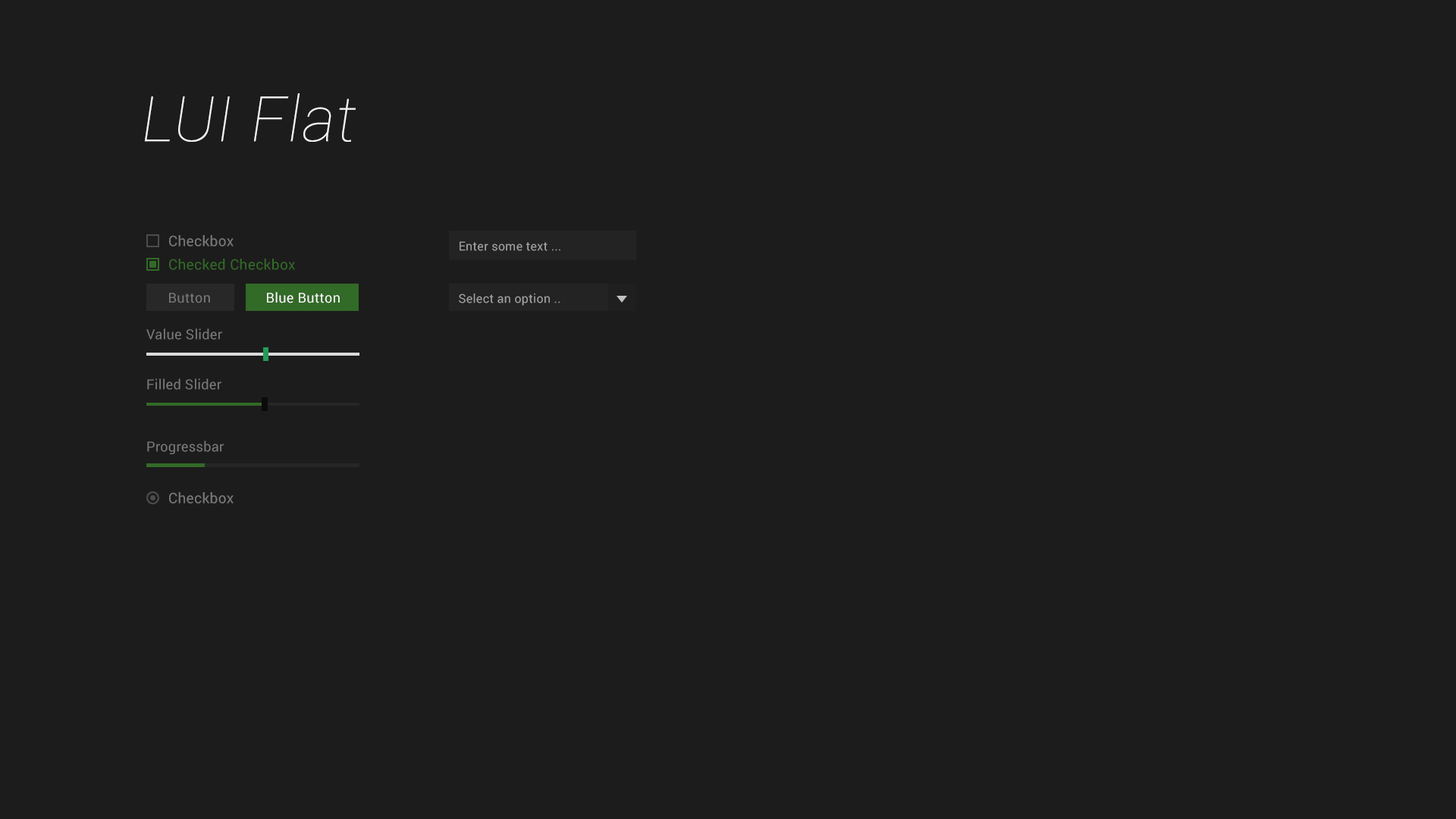
<style>
.page{position:relative;width:1456px;height:819px;background:#1c1c1c}
.page>*{position:absolute;margin:0}
.t1{font:62.9px "Roboto-ThinItalic";letter-spacing:0.02em;color:#f2f2f2}
.t2{font:14.4px "Roboto-Regular";letter-spacing:0.02em;color:#787878}
.t3{font:12.1px "Roboto-Regular";letter-spacing:0.02em;color:#9f9f9f}
.t4{font:14.4px "Roboto-Regular";letter-spacing:0.02em;color:#326a27}
.t5{font:13.6px "Roboto-Regular";letter-spacing:0.02em;color:#787878}
.t6{font:13.6px "Roboto-Regular";letter-spacing:0.02em;color:#f8f8f8}
</style>
<div class="page">
<p class="t1" style="left:144px;top:93px;width:212px;height:49px">LUI Flat</p>
<p class="t2" style="left:169px;top:235px;width:65px;height:11px">Checkbox</p>
<p class="t3" style="left:460px;top:241px;width:100px;height:10px">Enter some text ...</p>
<p class="t4" style="left:169px;top:259px;width:126px;height:11px">Checked Checkbox</p>
<p class="t5" style="left:169px;top:293px;width:41px;height:10px">Button</p>
<p class="t6" style="left:267px;top:292px;width:73px;height:11px">Blue Button</p>
<p class="t3" style="left:459px;top:293px;width:101px;height:13px">Select an option ..</p>
<p class="t5" style="left:146px;top:328px;width:76px;height:12px">Value Slider</p>
<p class="t5" style="left:147px;top:378px;width:74px;height:12px">Filled Slider</p>
<p class="t5" style="left:147px;top:441px;width:77px;height:13px">Progressbar</p>
<p class="t2" style="left:169px;top:492px;width:65px;height:12px">Checkbox</p>
</div>
